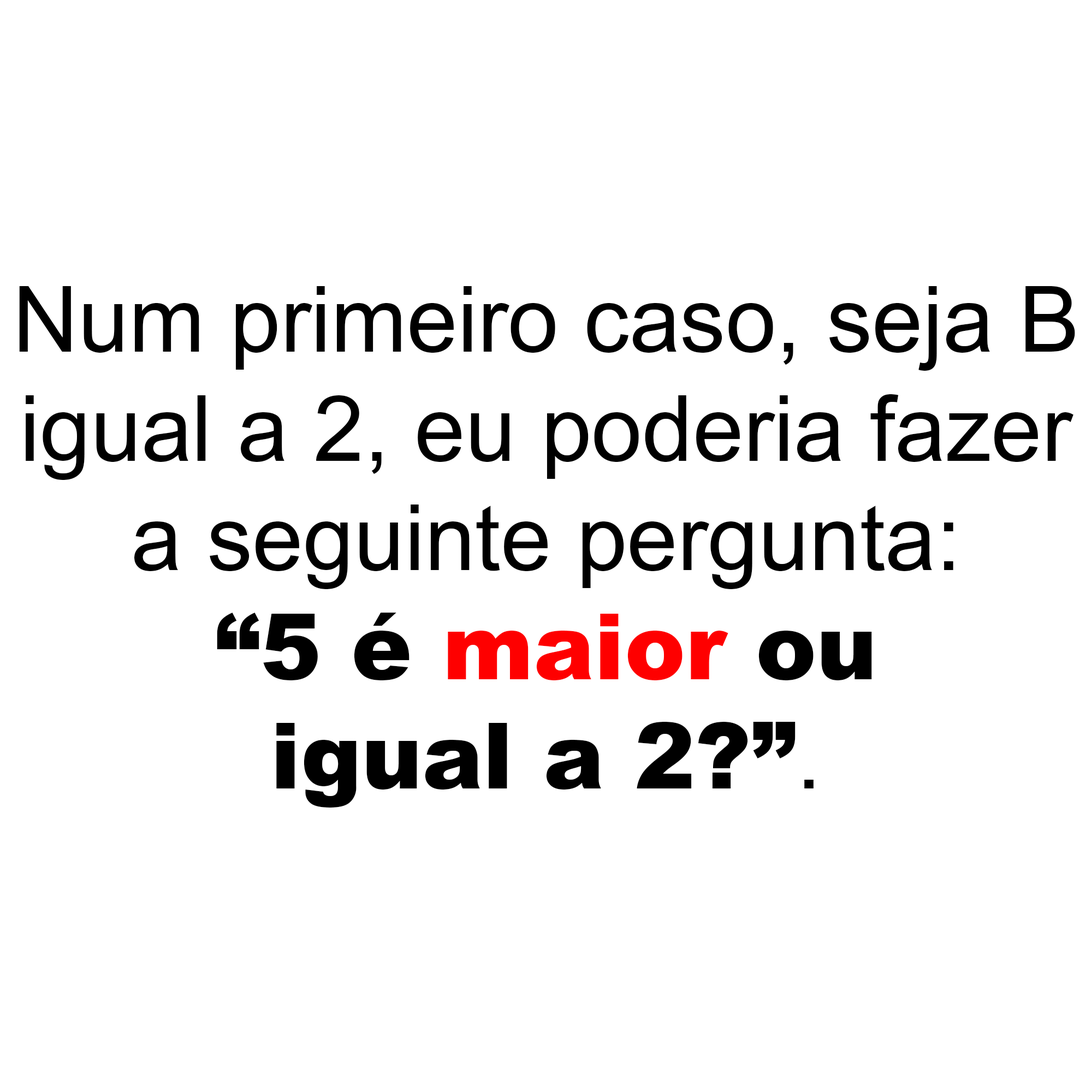
<style>
.page{position:relative;width:1092px;height:1092px;background:#ffffff}
.page>*{position:absolute;margin:0}
.t1{font:91px "ArialMT";color:#000000}
.t2{font:91px "Arial-Black";color:#000000}
.t3{font:91px "Arial-Black";color:#fe0000}
</style>
<div class="page">
<p class="t1" style="left:19px;top:286px;width:1056px;height:522px;text-align:center">Num primeiro caso, seja B<br>igual a 2, eu poderia fazer<br>a seguinte pergunta:<br><span class="t2">“5 é </span><span class="t3">maior</span><span class="t2"> ou<br>igual a 2?”</span>.</p>
</div>
